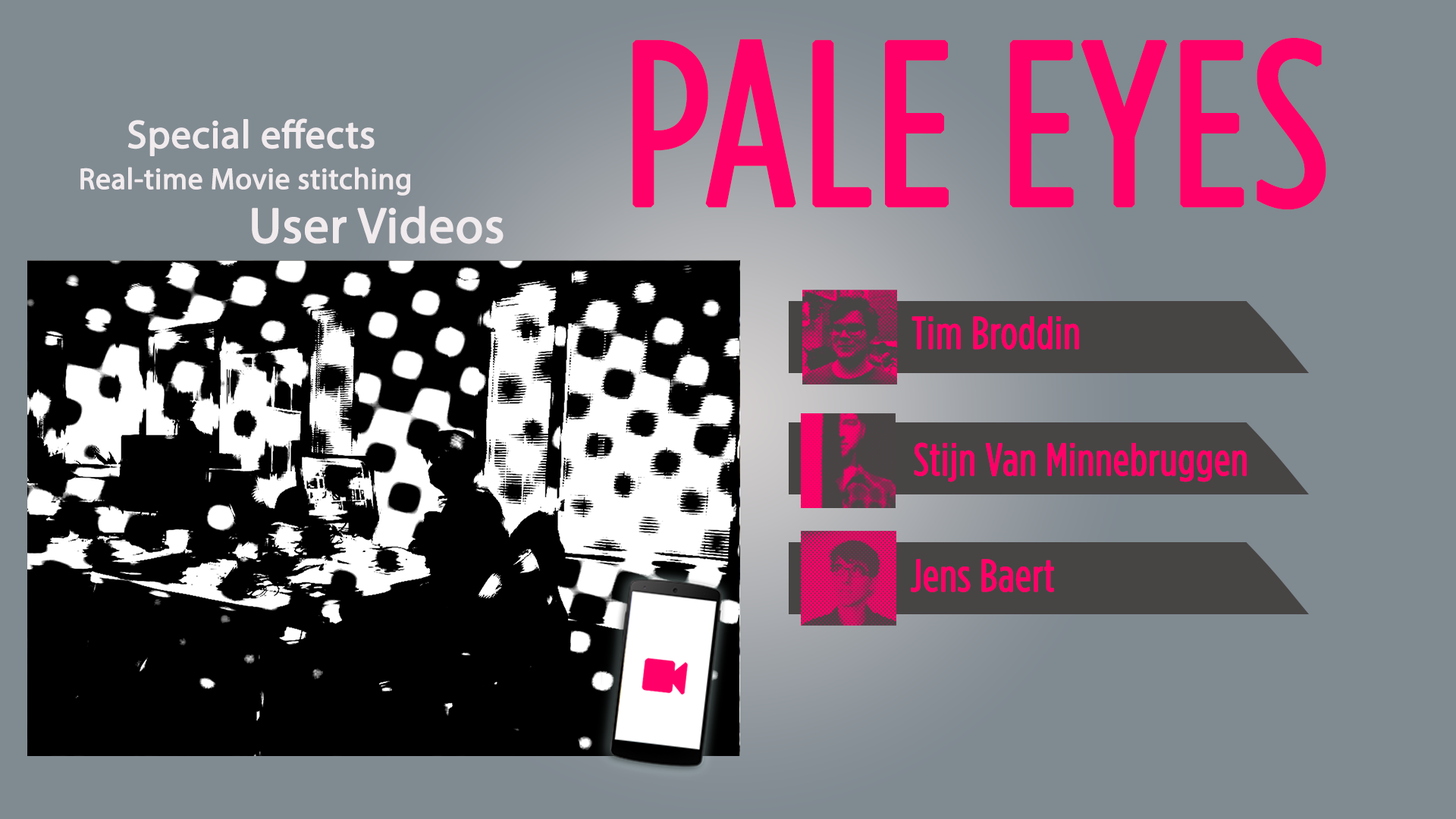
<style>
.page{position:relative;width:1456px;height:819px;background:#808a91}
.page>*{position:absolute;margin:0}
.t1{font:230.2px "GothamCondensed-Book";color:#ff0068;font-weight:bold}
.t2{font:39.5px "MyriadPro-Regular";color:#f1ebee;font-weight:bold}
.t3{font:29.6px "MyriadPro-Regular";color:#f1ebee;font-weight:bold}
.t4{font:50.1px "MyriadPro-Regular";color:#f1ebee;font-weight:bold}
.t5{font:44.8px "GothamCondensed-Book";color:#ff0068;font-weight:bold}
</style>
<div class="page">
<p class="t1" style="left:632px;top:38px;width:694px;height:172px">PALE EYES</p>
<p class="t2" style="left:127px;top:118px;width:248px;height:38px">Special effects</p>
<p class="t3" style="left:80px;top:167px;width:331px;height:29px">Real-time Movie stitching</p>
<p class="t4" style="left:252px;top:206px;width:252px;height:38px">User Videos</p>
<p class="t5" style="left:912px;top:316px;width:167px;height:34px">Tim Broddin</p>
<p class="t5" style="left:914px;top:442px;width:333px;height:40px">Stijn Van Minnebruggen</p>
<p class="t5" style="left:911px;top:559px;width:143px;height:33px">Jens Baert</p>
</div>
